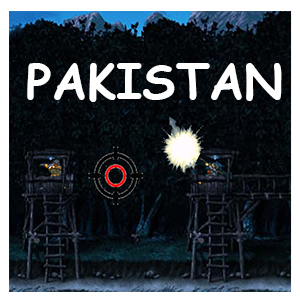
<style>
.page{position:relative;width:300px;height:300px}
.page>*{position:absolute;margin:0}
.t1{font:48px "ComicSansMS-Bold";color:#ffffff}
</style>
<div class="page">
<p class="t1" style="left:27px;top:63px;width:255px;height:39px">PAKISTAN</p>
</div>
